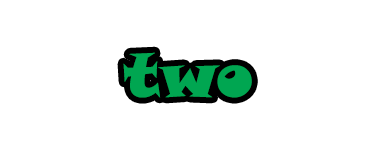
<style>
.page{position:relative;width:380px;height:161px;background:#ffffff}
.page>*{position:absolute;margin:0}
.t1{font:60px "SnapITC-Regular";color:#00a651}
</style>
<div class="page">
<p class="t1" style="left:123px;top:52px;width:129px;height:46px">two</p>
</div>
